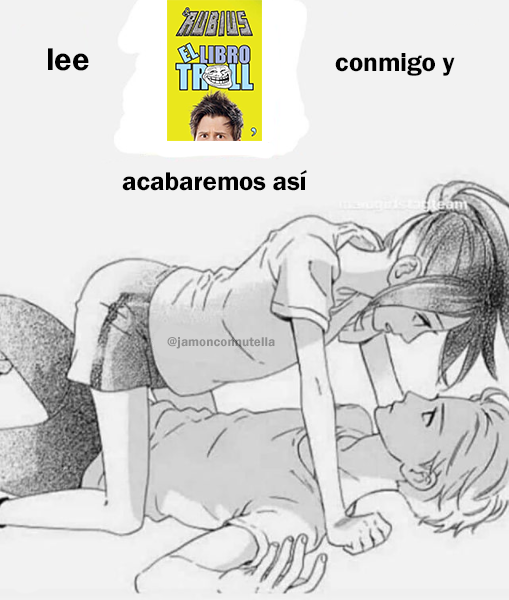
<style>
.page{position:relative;width:509px;height:600px;background:#f2f2f2}
.page>*{position:absolute;margin:0}
.t1{font:32.6px "FranklinGothic-Demi";color:#000000}
.t2{font:26.7px "FranklinGothic-Demi";color:#000000}
.t3{font:13.3px "FranklinGothic-Demi";color:#909090}
</style>
<div class="page">
<p class="t1" style="left:48px;top:48px;width:41px;height:23px">lee</p>
<p class="t2" style="left:335px;top:53px;width:120px;height:23px">conmigo y</p>
<p class="t2" style="left:122px;top:170px;width:185px;height:21px">acabaremos así</p>
<p class="t3" style="left:167px;top:337px;width:108px;height:12px">@jamonconnutella</p>
</div>
